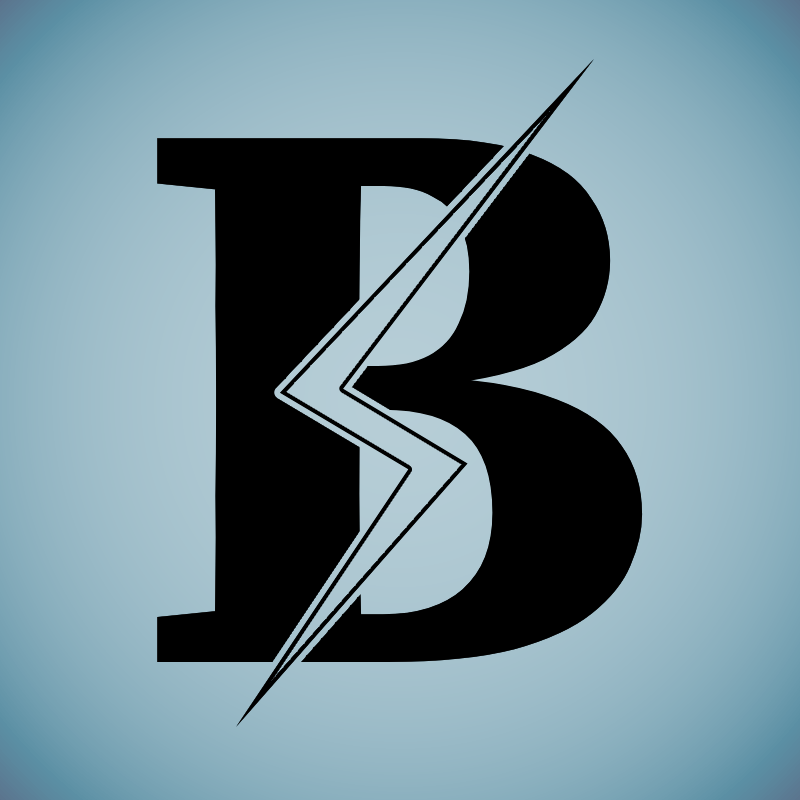
<style>
.page{position:relative;width:800px;height:800px;background:#000000}
.page>*{position:absolute;margin:0}
.t1{font:800px "SourceSerif4Roman-ExtraBold";color:#000000}
</style>
<div class="page">
<p class="t1" style="left:157px;top:138px;width:486px;height:524px">B</p>
</div>
